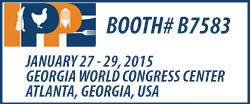
<style>
.page{position:relative;width:250px;height:104px;background:#ffffff}
.page>*{position:absolute;margin:0}
.t1{font:24.8px "MyriadPro-BoldCondIt";color:#123f6b}
.t2{font:17px/15px "MyriadPro-BoldCondIt";color:#123f6b}
</style>
<div class="page">
<p class="t1" style="left:106px;top:16px;width:125px;height:18px">BOOTH# B7583</p>
<p class="t2" style="left:25px;top:55px;width:200px;height:44px">JANUARY 27 - 29, 2015 <br>GEORGIA WORLD CONGRESS CENTER<br>ATLANTA, GEORGIA, USA</p>
</div>
